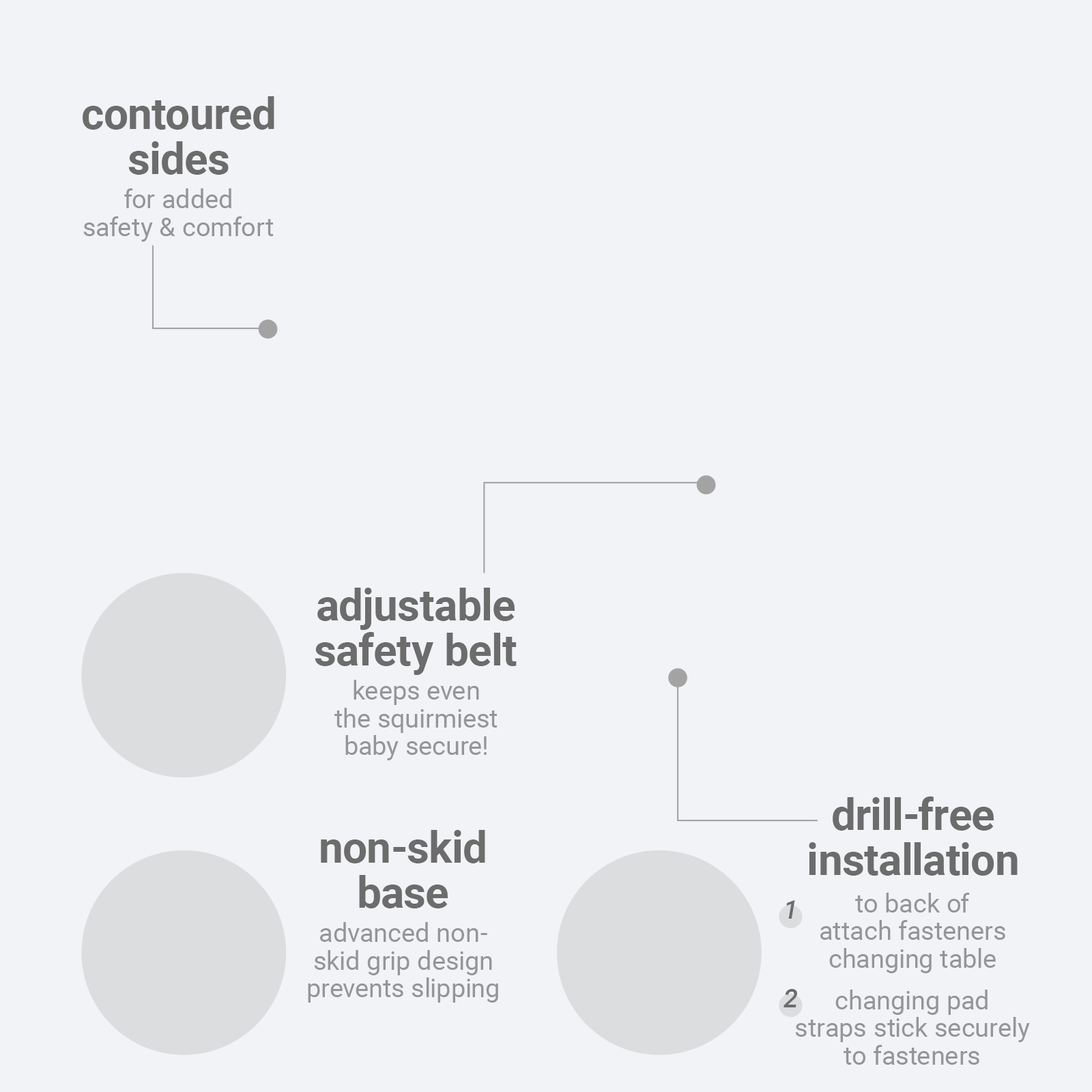
<style>
.page{position:relative;width:1092px;height:1092px;background:#f2f3f6}
.page>*{position:absolute;margin:0}
.t1{font:43.7px/45.1px "Roboto-Bold";color:#6c6c6c}
.t2{font:26.2px/27.7px "Roboto-Regular";color:#949596}
.t3{font:26.2px "Roboto-MediumItalic";color:#6c6c6c}
</style>
<div class="page">
<p class="t1" style="left:83px;top:96px;width:191px;height:79px;text-align:center">contoured<br>sides</p>
<p class="t2" style="left:83px;top:188px;width:191px;height:54px;text-align:center">for added<br>safety &amp; comfort</p>
<p class="t1" style="left:315px;top:588px;width:202px;height:87px;text-align:center">adjustable<br>safety belt</p>
<p class="t2" style="left:334px;top:680px;width:164px;height:80px;text-align:center">keeps even<br>the squirmiest<br>baby secure!</p>
<p class="t1" style="left:809px;top:796px;width:209px;height:80px;text-align:center">drill-free<br>installation</p>
<p class="t1" style="left:321px;top:830px;width:164px;height:78px;text-align:center">non-skid<br>base</p>
<p class="t2" style="left:820px;top:893px;width:185px;height:80px;text-align:center">to back of<br>attach fasteners<br>changing table</p>
<p class="t3" style="left:786px;top:900px;width:9px;height:19px">1</p>
<p class="t2" style="left:308px;top:922px;width:190px;height:81px;text-align:center">advanced non-<br>skid grip design<br>prevents slipping</p>
<p class="t3" style="left:783px;top:989px;width:14px;height:18px">2</p>
<p class="t2" style="left:795px;top:990px;width:235px;height:75px;text-align:center">changing pad<br>straps stick securely<br>to fasteners</p>
</div>
